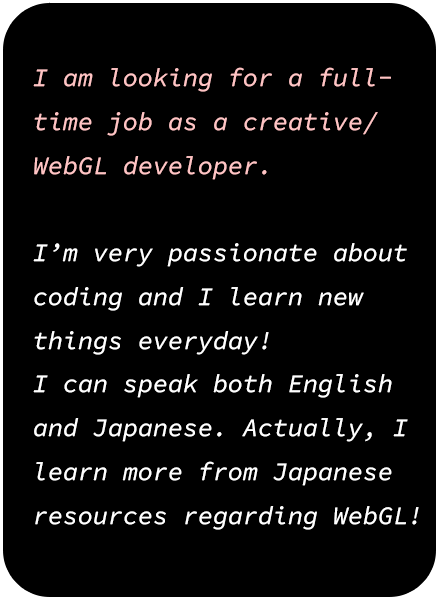
<style>
.page{position:relative;width:439px;height:600px;background:#000000}
.page>*{position:absolute;margin:0}
.t1{font:25px "SourceCodePro-Regular";color:#ffffff}
.t2{font:25px "SourceCodePro-Regular";color:#ffc4c4}
</style>
<div class="page">
<p class="t1" style="left:33px;top:67px;width:386px;height:463px"><span class="t2">I am looking for a full-<br>time job as a creative/<br>WebGL developer.<br></span><br>I’m very passionate about<br>coding and I learn new <br>things everyday! <br>I can speak both English <br>and Japanese. Actually, I<br>learn more from Japanese<br>resources regarding WebGL!</p>
</div>
